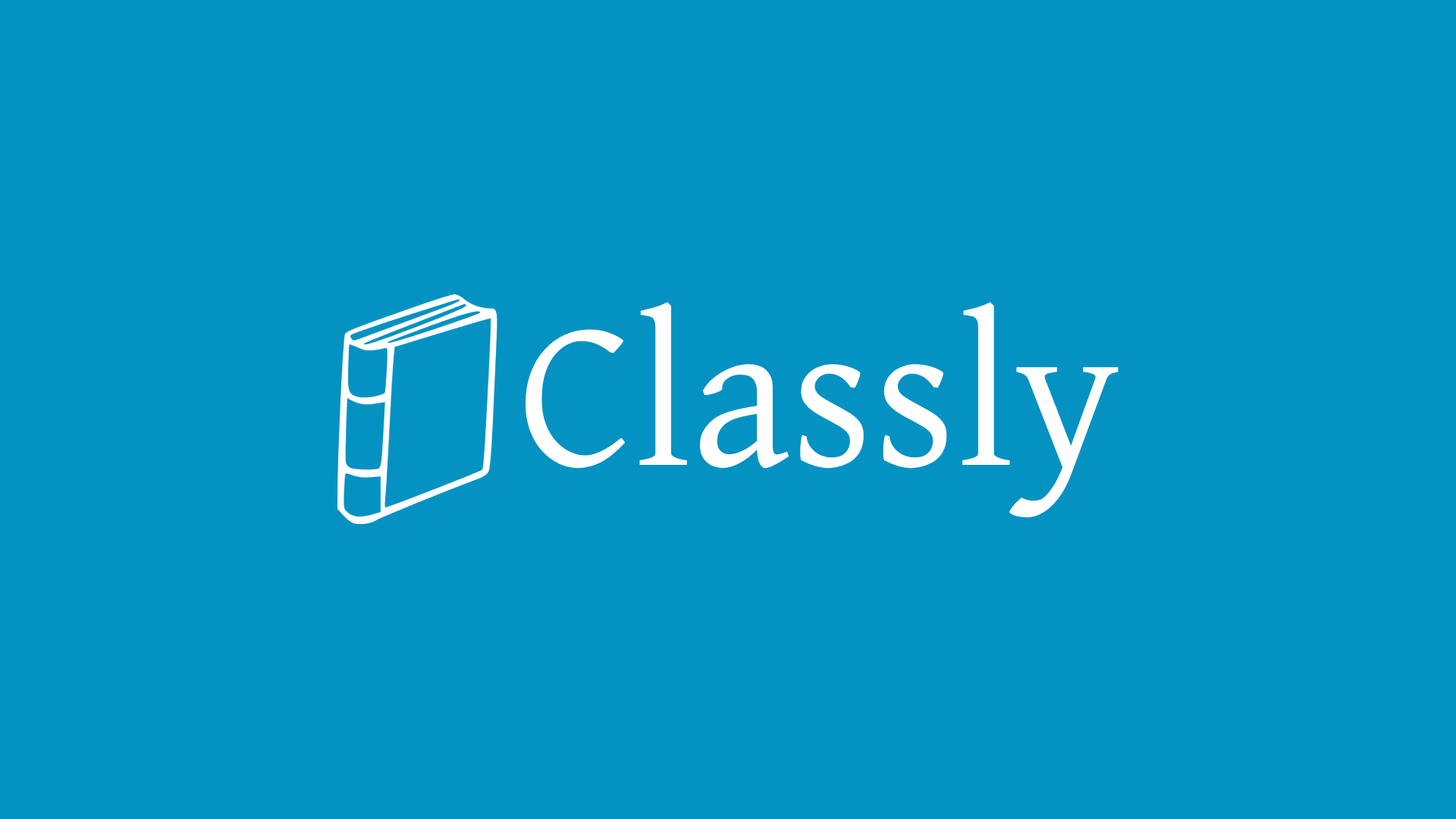
<style>
.page{position:relative;width:1456px;height:819px;background:#0492c2}
.page>*{position:absolute;margin:0}
.t1{font:214.8px "GentiumPlus";color:#ffffff}
</style>
<div class="page">
<p class="t1" style="left:526px;top:302px;width:593px;height:216px">Classly</p>
</div>
